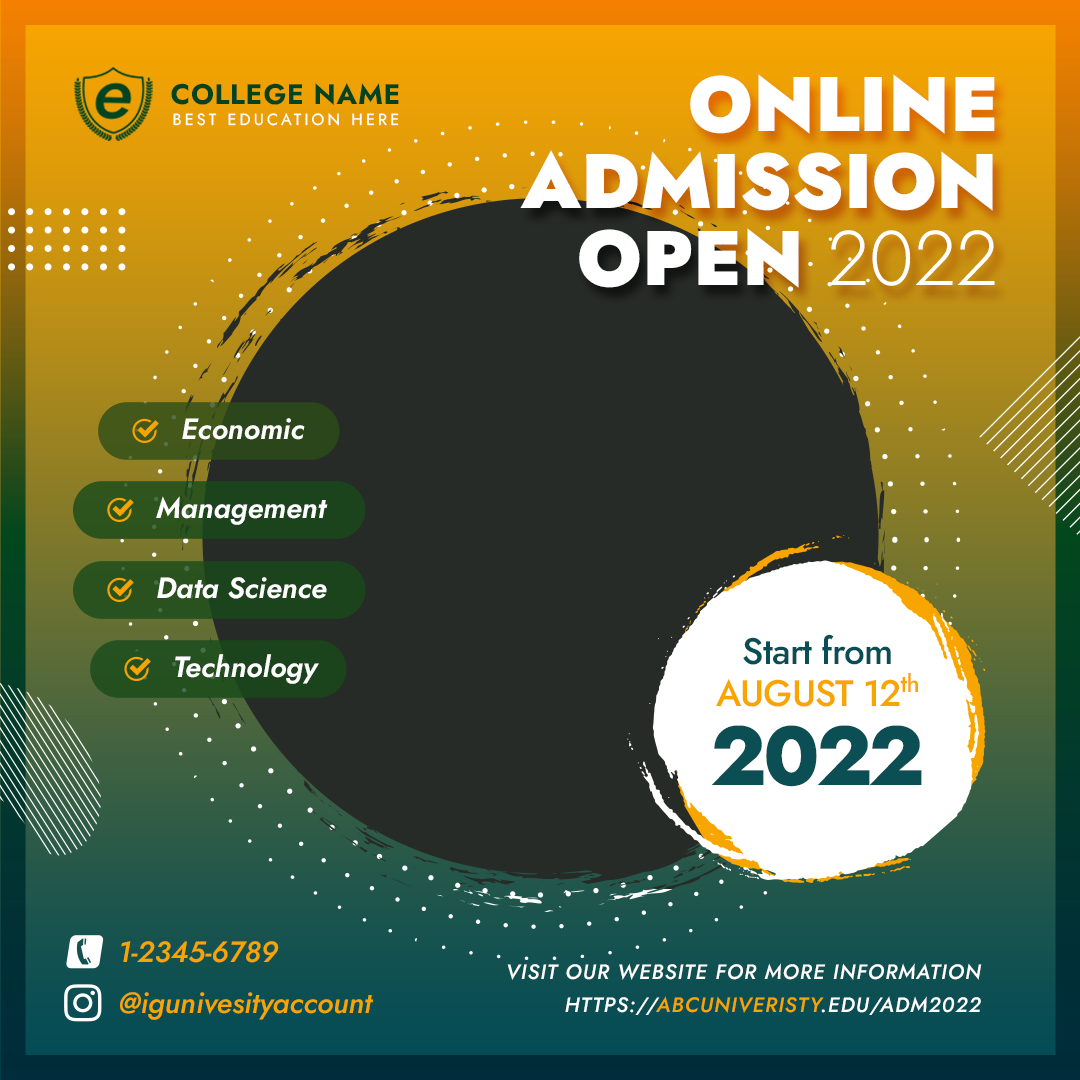
<style>
.page{position:relative;width:1080px;height:1080px;background:#272b28}
.page>*{position:absolute;margin:0}
.t1{font:77px/77px "Jost-Black";color:#ffffff}
.t2{font:77px/77px "Jost-Light";color:#ffffff}
.t3{font:28.2px "Jost-Bold";letter-spacing:0.025em;color:#034420;text-transform:uppercase}
.t4{font:16.2px "Jost-Regular";letter-spacing:0.2em;color:#ffffff;text-transform:uppercase}
.t5{font:29.2px "Jost-SemiBoldItalic";color:#ffffff}
.t6{font:36.8px/78.8px "Jost-Medium";letter-spacing:-0.025em;color:#094e54}
.t7{font:36.8px/41.7px "Jost-Medium";letter-spacing:-0.025em;color:#f9a500;text-transform:uppercase}
.t8{font:41.7px/41.7px "Jost-Medium";letter-spacing:-0.025em;color:#f9a500}
.t9{font:83.3px/78.8px "Jost-ExtraBold";letter-spacing:-0.05em;color:#0b4e53;text-transform:uppercase}
.t10{font:29.2px "Jost-MediumItalic";color:#f9a500}
.t11{font:20.8px/33.3px "Jost-MediumItalic";letter-spacing:0.05em;color:#ffffff;text-transform:uppercase}
.t12{font:20.8px/33.3px "Jost-MediumItalic";letter-spacing:0.05em;color:#f9a500;text-transform:uppercase}
</style>
<div class="page">
<p class="t1" style="left:520px;top:74px;width:475px;height:214px;text-align:right">ONLINE<br>ADMISSION<br>OPEN <span class="t2">2022</span></p>
<p class="t3" style="left:171px;top:83px;width:228px;height:22px">college name</p>
<p class="t4" style="left:173px;top:113px;width:226px;height:13px">best education here</p>
<p class="t5" style="left:182px;top:418px;width:123px;height:22px">Economic</p>
<p class="t5" style="left:156px;top:496px;width:172px;height:29px">Management</p>
<p class="t5" style="left:157px;top:577px;width:170px;height:22px">Data Science</p>
<p class="t6" style="left:711px;top:634px;width:211px;height:153px;text-align:center">Start from<br><span class="t7">August 12</span><span class="t8">th<br></span><span class="t9">2022</span></p>
<p class="t5" style="left:175px;top:654px;width:144px;height:30px">Technology</p>
<p class="t10" style="left:121px;top:941px;width:158px;height:22px">1-2345-6789</p>
<p class="t11" style="left:507px;top:963px;width:475px;height:52px;text-align:right">visit our website for more information<br>https://<span class="t12">abcuniveristy</span>.edu/adm2022</p>
<p class="t10" style="left:120px;top:992px;width:254px;height:28px">@igunivesityaccount</p>
</div>
